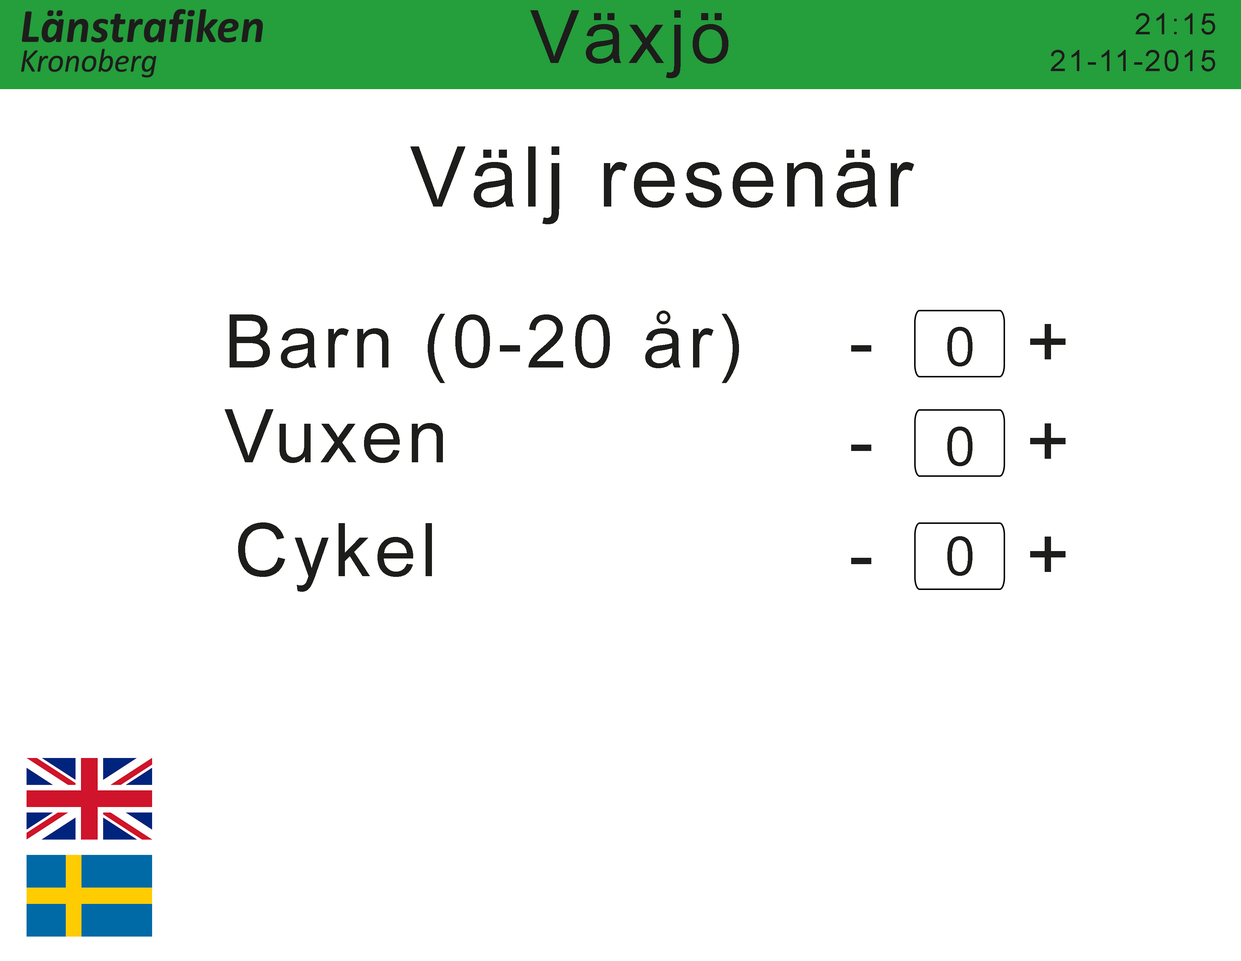
<style>
.page{position:relative;width:1241px;height:961px;background:#ffffff}
.page>*{position:absolute;margin:0}
.t1{font:73.4px "ArialMT";letter-spacing:0.06em;color:#1d1d1b}
.t2{font:29.8px "ArialMT";letter-spacing:0.06em;color:#1d1d1b}
.t3{font:84px "ArialMT";letter-spacing:0.06em;color:#1d1d1b}
.t4{font:73.8px "ArialMT";letter-spacing:0.06em;color:#1d1d1b}
.t5{font:53.7px "ArialMT";letter-spacing:0.06em;color:#1d1d1b}
</style>
<div class="page">
<p class="t1" style="left:530px;top:10px;width:198px;height:68px">Växjö</p>
<p class="t2" style="left:1135px;top:13px;width:80px;height:22px">21:15</p>
<p class="t2" style="left:1051px;top:50px;width:164px;height:21px">21-11-2015</p>
<p class="t3" style="left:410px;top:146px;width:504px;height:78px">Välj resenär</p>
<p class="t4" style="left:230px;top:311px;width:509px;height:72px">Barn (0-20 år)</p>
<p class="t5" style="left:947px;top:327px;width:25px;height:39px">0</p>
<p class="t4" style="left:1030px;top:324px;width:35px;height:35px">+</p>
<p class="t4" style="left:225px;top:409px;width:218px;height:54px">Vuxen</p>
<p class="t4" style="left:1030px;top:423px;width:35px;height:36px">+</p>
<p class="t5" style="left:947px;top:427px;width:25px;height:39px">0</p>
<p class="t4" style="left:238px;top:522px;width:194px;height:70px">Cykel</p>
<p class="t5" style="left:947px;top:536px;width:25px;height:40px">0</p>
<p class="t4" style="left:1030px;top:537px;width:35px;height:35px">+</p>
</div>
